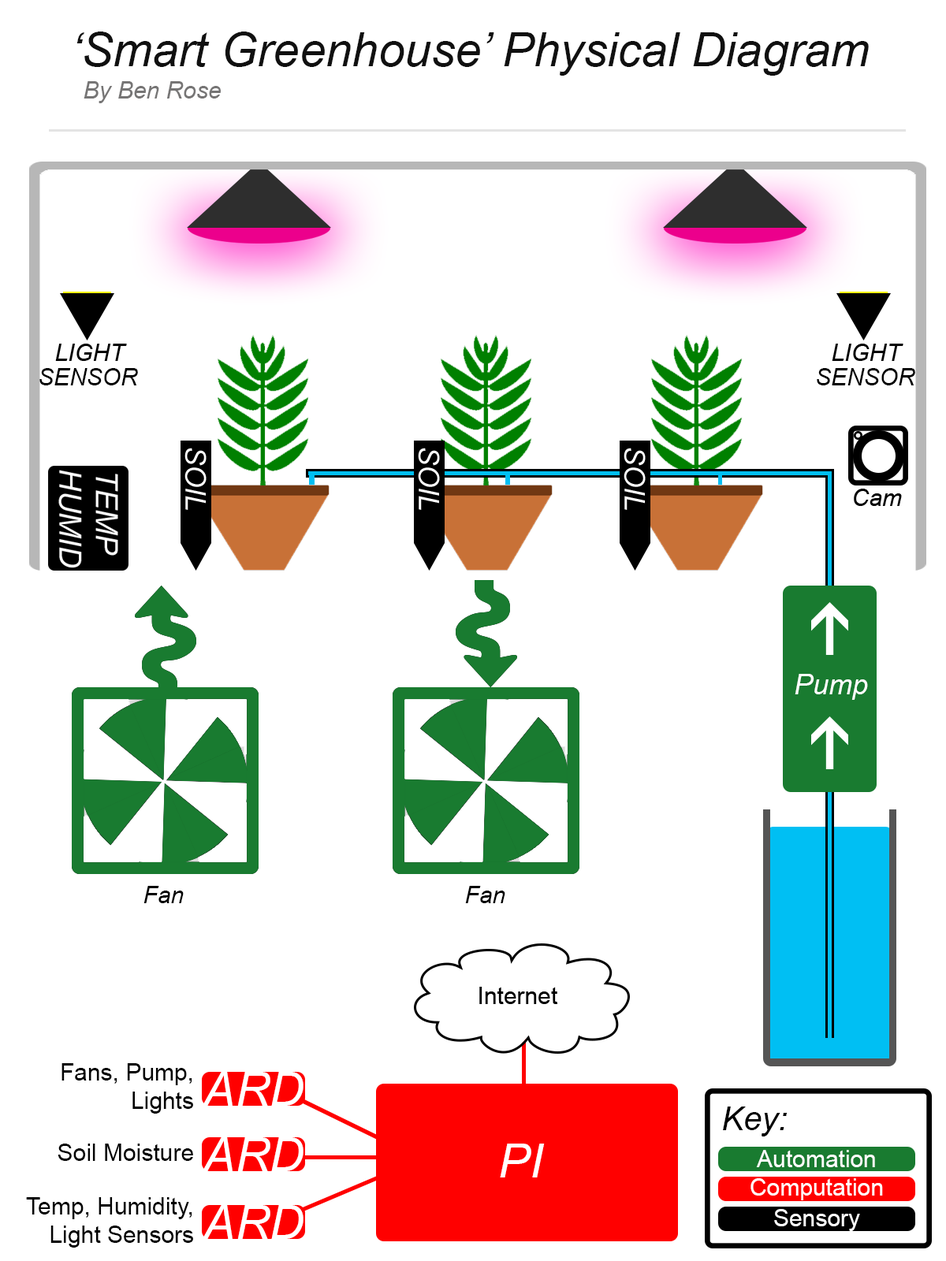
<style>
.page{position:relative;width:946px;height:1261px;background:#ffffff}
.page>*{position:absolute;margin:0}
.t1{font:47.3px "Arial-ItalicMT";color:#101010}
.t2{font:23.6px "Arial-ItalicMT";color:#767575}
.t3{font:23.6px "Arial-ItalicMT";color:#000000}
.t4{font:28.4px "Arial-ItalicMT";color:#ffffff}
.t5{font:23.6px "ArialMT";color:#000000}
.t6{font:47.3px "Arial-ItalicMT";color:#ffffff}
.t7{font:32.8px "Arial-ItalicMT";color:#000000}
.t8{font:23.6px "ArialMT";color:#ffffff}
</style>
<div class="page">
<p class="t1" style="left:76px;top:32px;width:792px;height:44px">‘Smart Greenhouse’ Physical Diagram</p>
<p class="t2" style="left:84px;top:81px;width:137px;height:22px">By Ben Rose</p>
<p class="t3" style="left:39px;top:368px;width:99px;height:17px">SENSOR</p>
<p class="t3" style="left:816px;top:368px;width:99px;height:17px">SENSOR</p>
<p class="t4" style="left:794px;top:674px;width:74px;height:26px">Pump</p>
<p class="t3" style="left:143px;top:886px;width:41px;height:17px">Fan</p>
<p class="t3" style="left:465px;top:886px;width:40px;height:17px">Fan</p>
<p class="t5" style="left:61px;top:1063px;width:132px;height:51px;text-align:right">Fans, Pump,<br>Lights</p>
<p class="t6" style="left:203px;top:1072px;width:100px;height:34px">ARD</p>
<p class="t7" style="left:723px;top:1106px;width:64px;height:30px">Key:</p>
<p class="t5" style="left:58px;top:1143px;width:135px;height:18px">Soil Moisture</p>
<p class="t6" style="left:203px;top:1137px;width:100px;height:34px">ARD</p>
<p class="t6" style="left:500px;top:1143px;width:45px;height:34px">PI</p>
<p class="t8" style="left:756px;top:1150px;width:119px;height:17px">Automation</p>
<p class="t8" style="left:750px;top:1178px;width:133px;height:22px">Computation</p>
<p class="t5" style="left:26px;top:1197px;width:167px;height:51px;text-align:right">Temp, Humidity,<br>Light Sensors</p>
<p class="t6" style="left:203px;top:1205px;width:100px;height:34px">ARD</p>
<p class="t8" style="left:774px;top:1209px;width:86px;height:22px">Sensory</p>
</div>
